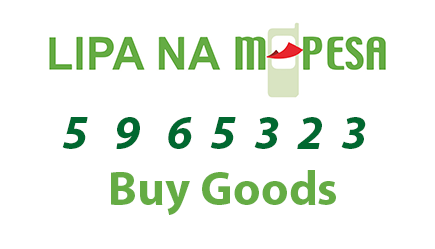
<style>
.page{position:relative;width:435px;height:249px;background:#ffffff}
.page>*{position:absolute;margin:0}
.t1{font:48px "MyriadPro-BoldIt";color:#016830}
.t2{font:48px "MyriadPro-Bold";color:#65ac44}
</style>
<div class="page">
<p class="t1" style="left:62px;top:117px;width:304px;height:32px">5   9   6  5  3  2  3</p>
<p class="t2" style="left:111px;top:170px;width:225px;height:45px">Buy Goods</p>
</div>
